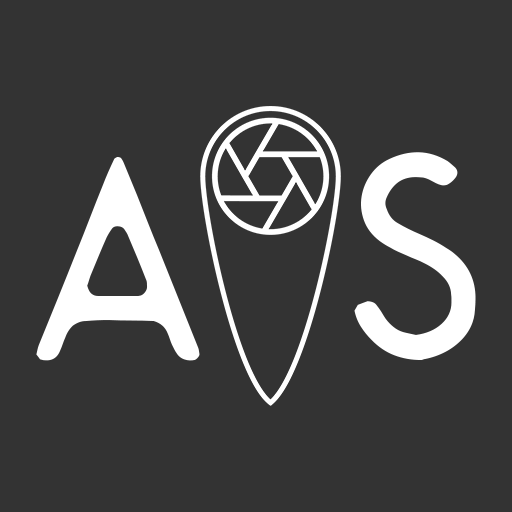
<style>
.page{position:relative;width:512px;height:512px;background:#333333}
.page>*{position:absolute;margin:0}
.t1{font:304px "Montharo-Inky";color:#ffffff}
</style>
<div class="page">
<p class="t1" style="left:36px;top:152px;width:440px;height:209px">A S</p>
</div>
